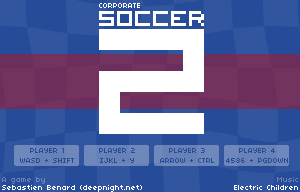
<style>
.page{position:relative;width:300px;height:192px;background:#264c99}
.page>*{position:absolute;margin:0}
.t1{font:8px "04b03";color:#ffffff}
.t2{font:39px "VisitorTT2BRK";color:#ffffff}
.t3{font:269.1px "VisitorTT2BRK";color:#ffffff}
.t4{font:8px "04b03";color:#264c99}
.t5{font:8px "04b03";color:#6882b8}
</style>
<div class="page">
<p class="t1" style="left:99px;top:3px;width:41px;height:5px">CORPORATE</p>
<p class="t2" style="left:99px;top:11px;width:105px;height:15px">SOCCER</p>
<p class="t3" style="left:99px;top:29px;width:105px;height:105px">2</p>
<p class="t4" style="left:20px;top:148px;width:54px;height:15px;text-align:center">PLAYER 1<br>WASD + SHIFT</p>
<p class="t4" style="left:99px;top:148px;width:36px;height:15px;text-align:center">PLAYER 2<br>IJKL + Y</p>
<p class="t4" style="left:160px;top:148px;width:54px;height:15px;text-align:center">PLAYER 3<br>ARROW + CTRL</p>
<p class="t4" style="left:226px;top:148px;width:62px;height:15px;text-align:center">PLAYER 4<br>4586 + PGDOWN</p>
<p class="t1" style="left:2px;top:185px;width:140px;height:7px">Sebastien Benard (deepnight.net)</p>
<p class="t5" style="left:2px;top:177px;width:43px;height:7px">A game by</p>
<p class="t1" style="left:234px;top:185px;width:64px;height:5px">Electric Children</p>
<p class="t5" style="left:277px;top:177px;width:21px;height:5px">Music</p>
</div>
